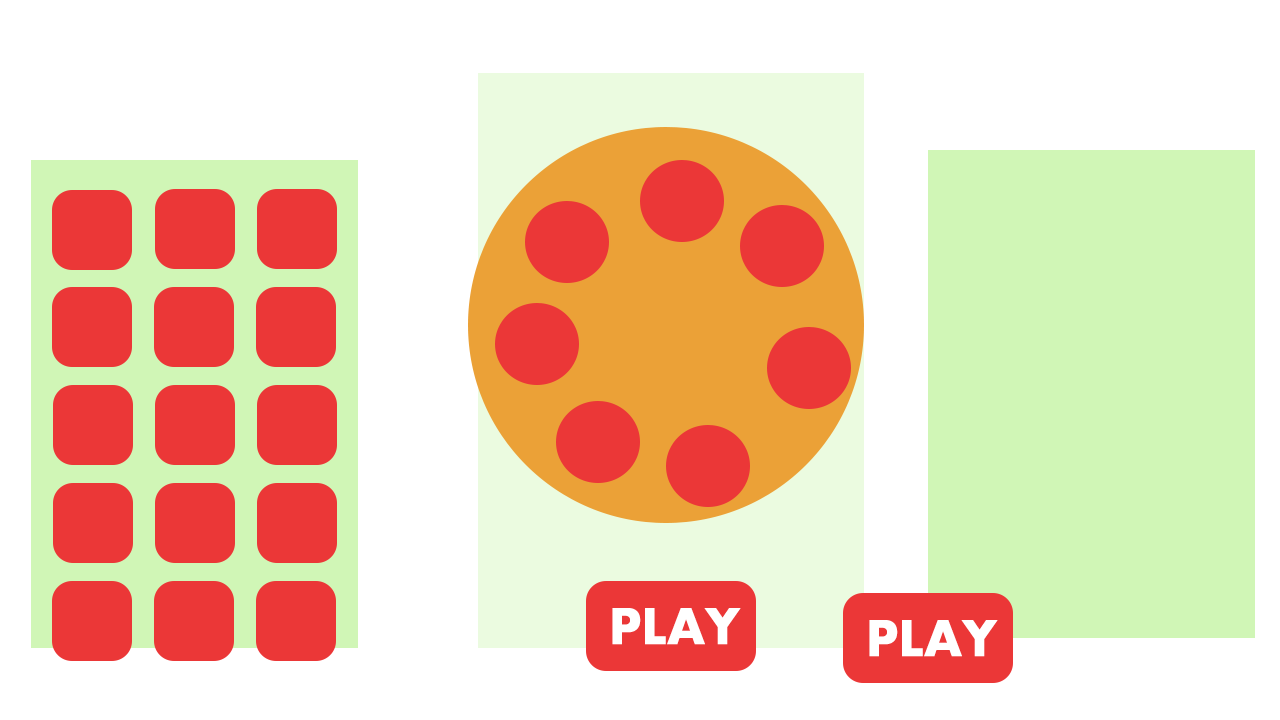
<style>
.page{position:relative;width:1280px;height:720px;background:#ffffff}
.page>*{position:absolute;margin:0}
.t1{font:48px "Futura-Bold";color:#ffffff}
</style>
<div class="page">
<p class="t1" style="left:612px;top:608px;width:129px;height:37px">PLAY</p>
</div>
